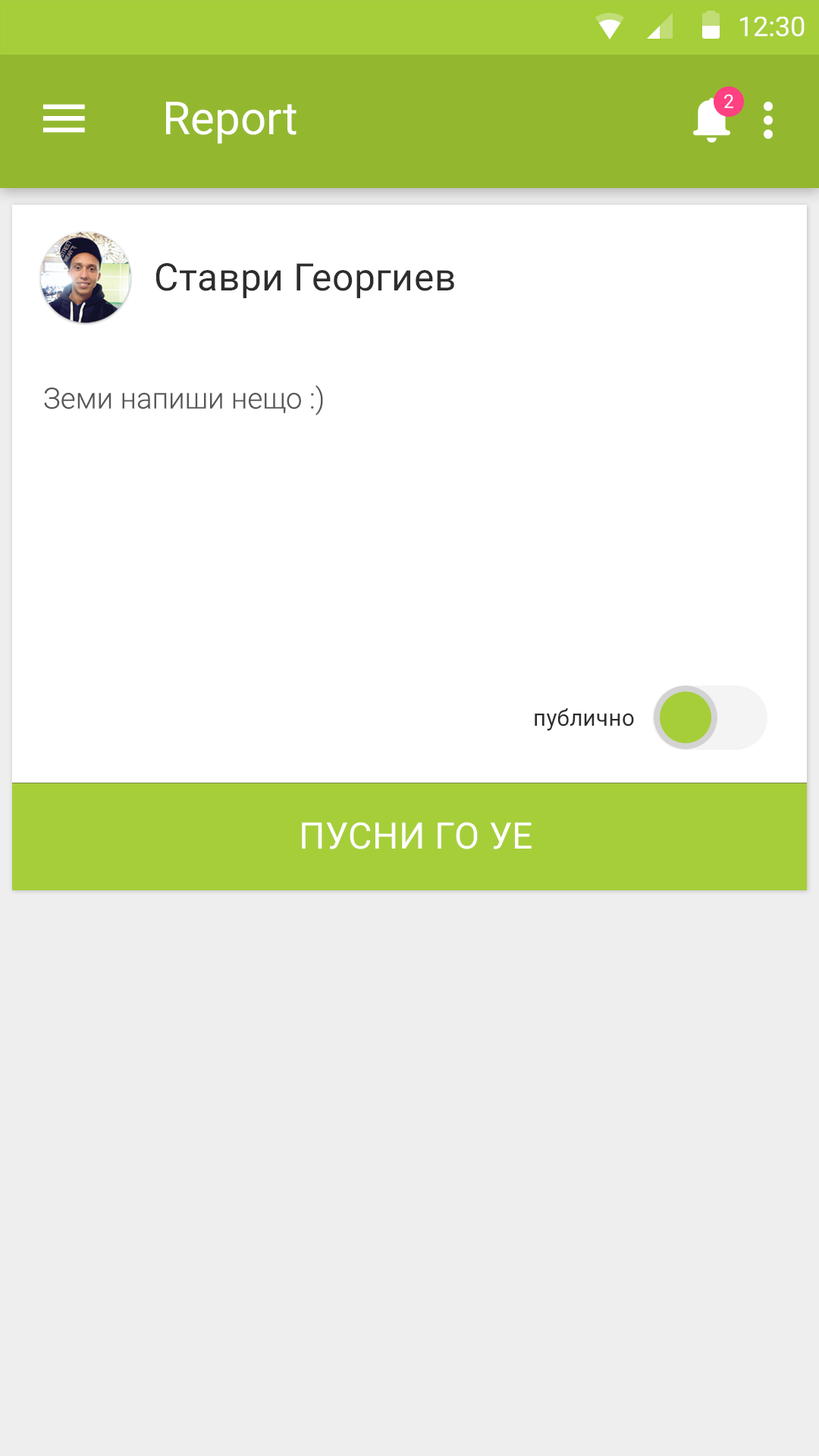
<style>
.page{position:relative;width:819px;height:1456px;background:#eeeeee}
.page>*{position:absolute;margin:0}
.t1{font:27.3px "Roboto-Regular";color:#ffffff}
.t2{font:45.5px "Roboto-Regular";color:#ffffff}
.t3{font:18.2px "Roboto-Light";color:#ffffff;font-weight:bold}
.t4{font:37.8px "Roboto-Regular";letter-spacing:0.01em;color:#2d2d2d}
.t5{font:28.9px "Roboto-Light";color:#585858}
.t6{font:22.9px "Roboto-Regular";letter-spacing:0.01em;color:#2d2d2d}
.t7{font:36.4px "Roboto-Regular";letter-spacing:0.01em;color:#ffffff}
</style>
<div class="page">
<p class="t1" style="left:740px;top:17px;width:65px;height:19px">12:30</p>
<p class="t2" style="left:166px;top:102px;width:131px;height:42px">Report</p>
<p class="t3" style="left:724px;top:94px;width:10px;height:14px">2</p>
<p class="t4" style="left:156px;top:263px;width:298px;height:36px">Ставри Георгиев</p>
<p class="t5" style="left:44px;top:385px;width:279px;height:31px">Земи напиши нещо :)</p>
<p class="t6" style="left:535px;top:708px;width:99px;height:23px">публично</p>
<p class="t7" style="left:302px;top:822px;width:230px;height:27px">ПУСНИ ГО УЕ</p>
</div>
